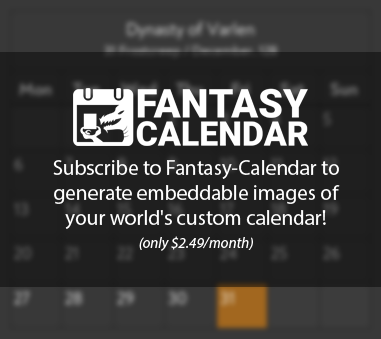
<style>
.page{position:relative;width:381px;height:339px;background:#1f1f1f}
.page>*{position:absolute;margin:0}
.t1{font:21px "MyriadPro-Regular";color:#ffffff}
.t2{font:15px/23px "MyriadPro-It";color:#ffffff}
</style>
<div class="page">
<p class="t1" style="left:53px;top:160px;width:287px;height:91px;text-align:center">Subscribe to Fantasy-Calendar to generate embeddable images of your world's custom calendar!<br><span class="t2">(only $2.49/month)</span></p>
</div>
